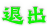
<style>
.page{position:relative;width:47px;height:27px}
.page>*{position:absolute;margin:0}
.t1{font:24.2px "GraveBustedStoneLishuSCRoughlyC";color:#0ffc03}
</style>
<div class="page">
<p class="t1" style="left:2px;top:6px;width:44px;height:19px;rotate:-1deg">退出</p>
</div>
